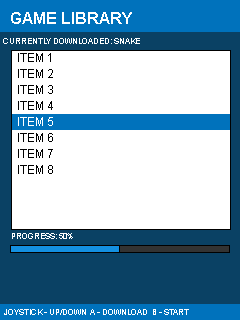
<style>
.page{position:relative;width:240px;height:320px;background:#ffffff}
.page>*{position:absolute;margin:0}
.t1{font:16px "Arial-BoldMT";color:#ffffff;text-transform:uppercase}
.t2{font:8px "ArialMT";color:#ffffff;text-transform:uppercase}
.t3{font:12px "ArialMT";color:#000000;text-transform:uppercase}
.t4{font:12px "ArialMT";color:#ffffff;text-transform:uppercase}
</style>
<div class="page">
<p class="t1" style="left:11px;top:12px;width:121px;height:12px">Game library</p>
<p class="t2" style="left:3px;top:38px;width:137px;height:6px">Currently Downloaded: Snake</p>
<p class="t3" style="left:18px;top:53px;width:33px;height:9px">Item 1</p>
<p class="t3" style="left:18px;top:69px;width:35px;height:9px">Item 2</p>
<p class="t3" style="left:18px;top:85px;width:35px;height:9px">Item 3</p>
<p class="t3" style="left:18px;top:101px;width:35px;height:9px">Item 4</p>
<p class="t4" style="left:18px;top:117px;width:35px;height:9px">Item 5</p>
<p class="t3" style="left:18px;top:133px;width:35px;height:9px">Item 6</p>
<p class="t3" style="left:18px;top:149px;width:35px;height:9px">Item 7</p>
<p class="t3" style="left:18px;top:165px;width:35px;height:9px">Item 8</p>
<p class="t2" style="left:12px;top:233px;width:61px;height:6px">Progress: 50%</p>
<p class="t2" style="left:4px;top:309px;width:185px;height:6px">JOYSTICk - UP/DOWN  a - download  B - Start</p>
</div>
